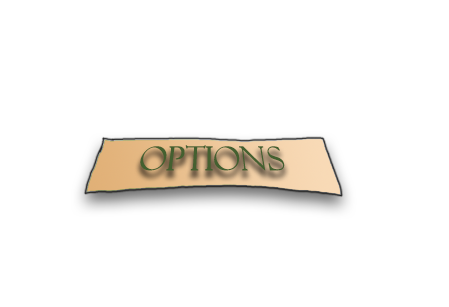
<style>
.page{position:relative;width:449px;height:307px;background:#ffffff}
.page>*{position:absolute;margin:0}
.t1{font:33.3px "FelixTitlingMT";color:#446030}
</style>
<div class="page">
<p class="t1" style="left:140px;top:145px;width:145px;height:26px">Options</p>
</div>
